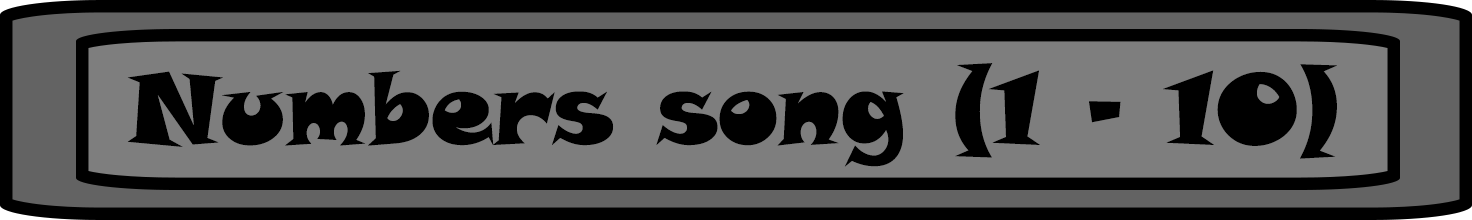
<style>
.page{position:relative;width:1472px;height:220px;background:#7e7e7e}
.page>*{position:absolute;margin:0}
.t1{font:100px "SnapITC-Regular";color:#000000}
</style>
<div class="page">
<p class="t1" style="left:127px;top:63px;width:1210px;height:104px">Numbers song (1 - 10)</p>
</div>
